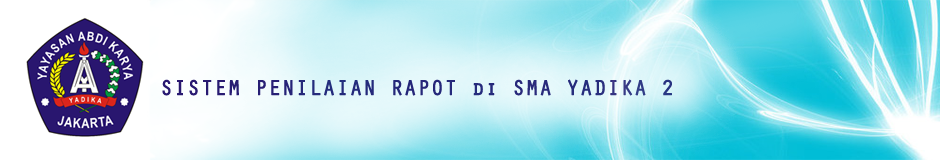
<style>
.page{position:relative;width:940px;height:160px}
.page>*{position:absolute;margin:0}
.t1{font:21.6px "OratorStd";color:#29166f;font-weight:bold}
</style>
<div class="page">
<p class="t1" style="left:162px;top:79px;width:510px;height:17px">SISTEM PENILAIAN RAPOT di SMA YADIKA 2</p>
</div>
